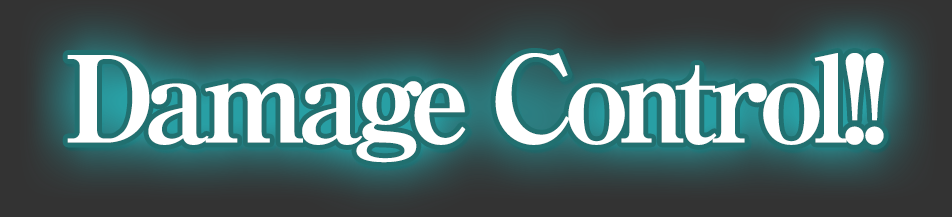
<style>
.page{position:relative;width:952px;height:217px}
.page>*{position:absolute;margin:0}
.t1{font:120px "RyuminPro-ExBold";letter-spacing:-0.08em;color:#ffffff}
</style>
<div class="page">
<p class="t1" style="left:67px;top:53px;width:817px;height:110px">Damage Control!!</p>
</div>
